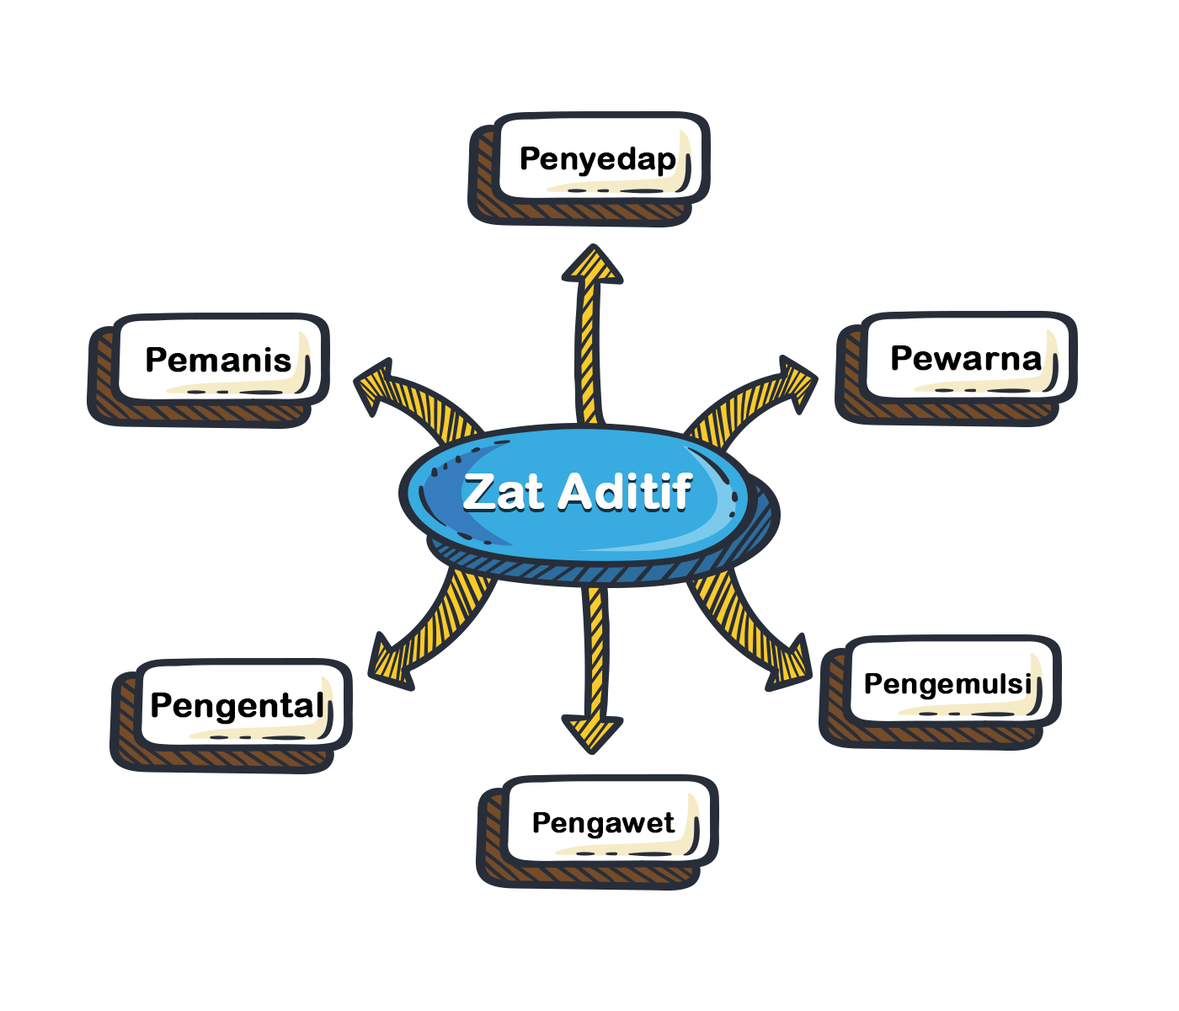
<style>
.page{position:relative;width:1179px;height:1011px;background:#ffffff}
.page>*{position:absolute;margin:0}
.t1{font:31.6px "ArialRoundedMTBold";color:#000000;font-weight:bold}
.t2{font:34.6px "ArialRoundedMTBold";color:#000000;font-weight:bold}
.t3{font:48.7px "ArialRoundedMTBold";color:#fffefe;font-weight:bold}
.t4{font:28.9px "ArialRoundedMTBold";color:#000000;font-weight:bold}
</style>
<div class="page">
<p class="t1" style="left:521px;top:147px;width:156px;height:30px">Penyedap</p>
<p class="t2" style="left:147px;top:347px;width:144px;height:25px">Pemanis</p>
<p class="t2" style="left:892px;top:345px;width:150px;height:26px">Pewarna</p>
<p class="t3" style="left:463px;top:473px;width:230px;height:36px">Zat Aditif</p>
<p class="t4" style="left:865px;top:673px;width:166px;height:27px">Pengemulsi</p>
<p class="t2" style="left:152px;top:692px;width:172px;height:33px">Pengental</p>
<p class="t4" style="left:533px;top:812px;width:143px;height:27px">Pengawet</p>
</div>
